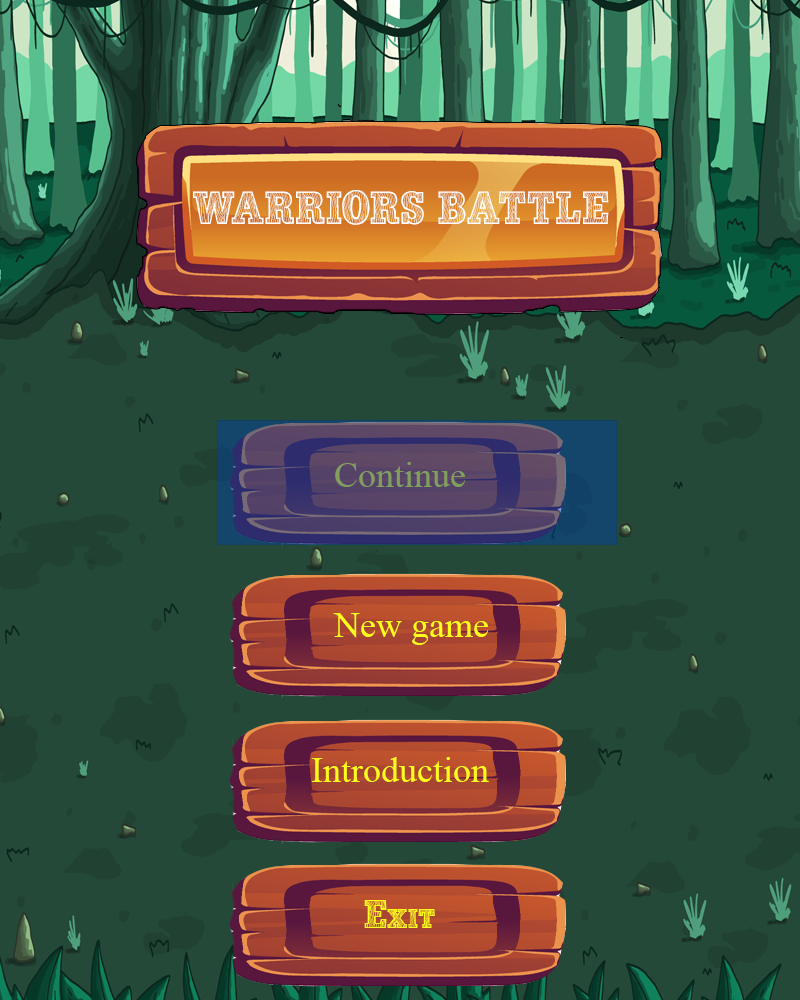
<style>
.page{position:relative;width:800px;height:1000px;background:#254938}
.page>*{position:absolute;margin:0}
.t1{font:42.4px "WoodLook";color:#ffffff}
.t2{font:36px "TimesNewRomanPSMT";color:#819e5d}
.t3{font:36px "TimesNewRomanPSMT";color:#fffc1d}
.t4{font:36px "WoodLook";color:#fffc1d}
</style>
<div class="page">
<p class="t1" style="left:193px;top:190px;width:416px;height:35px">WARRIORS BATTLE</p>
<p class="t2" style="left:335px;top:462px;width:130px;height:25px">Continue</p>
<p class="t3" style="left:333px;top:613px;width:155px;height:32px">New game</p>
<p class="t3" style="left:311px;top:757px;width:178px;height:25px">Introduction</p>
<p class="t4" style="left:364px;top:900px;width:71px;height:28px">Exit</p>
</div>
